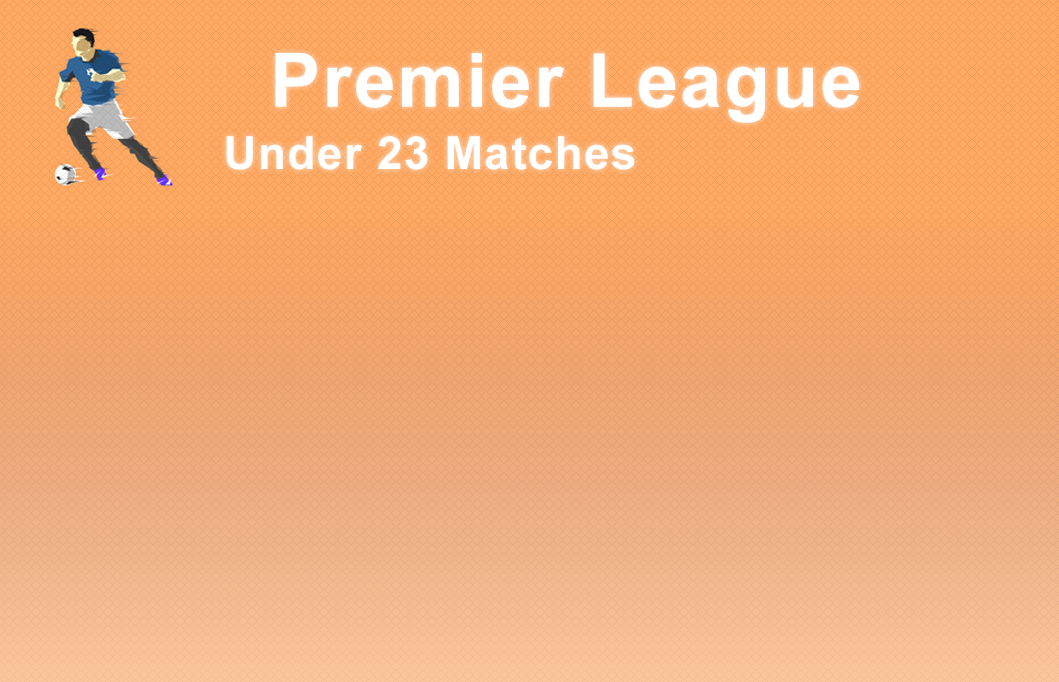
<style>
.page{position:relative;width:1059px;height:682px}
.page>*{position:absolute;margin:0}
.t1{font:75px "Arial-BoldMT";letter-spacing:0.03em;color:#ffffff}
.t2{font:45.8px "Arial-BoldMT";letter-spacing:0.03em;color:#ffffff}
</style>
<div class="page">
<p class="t1" style="left:275px;top:53px;width:585px;height:70px">Premier League</p>
<p class="t2" style="left:226px;top:136px;width:409px;height:34px">Under 23 Matches</p>
</div>
